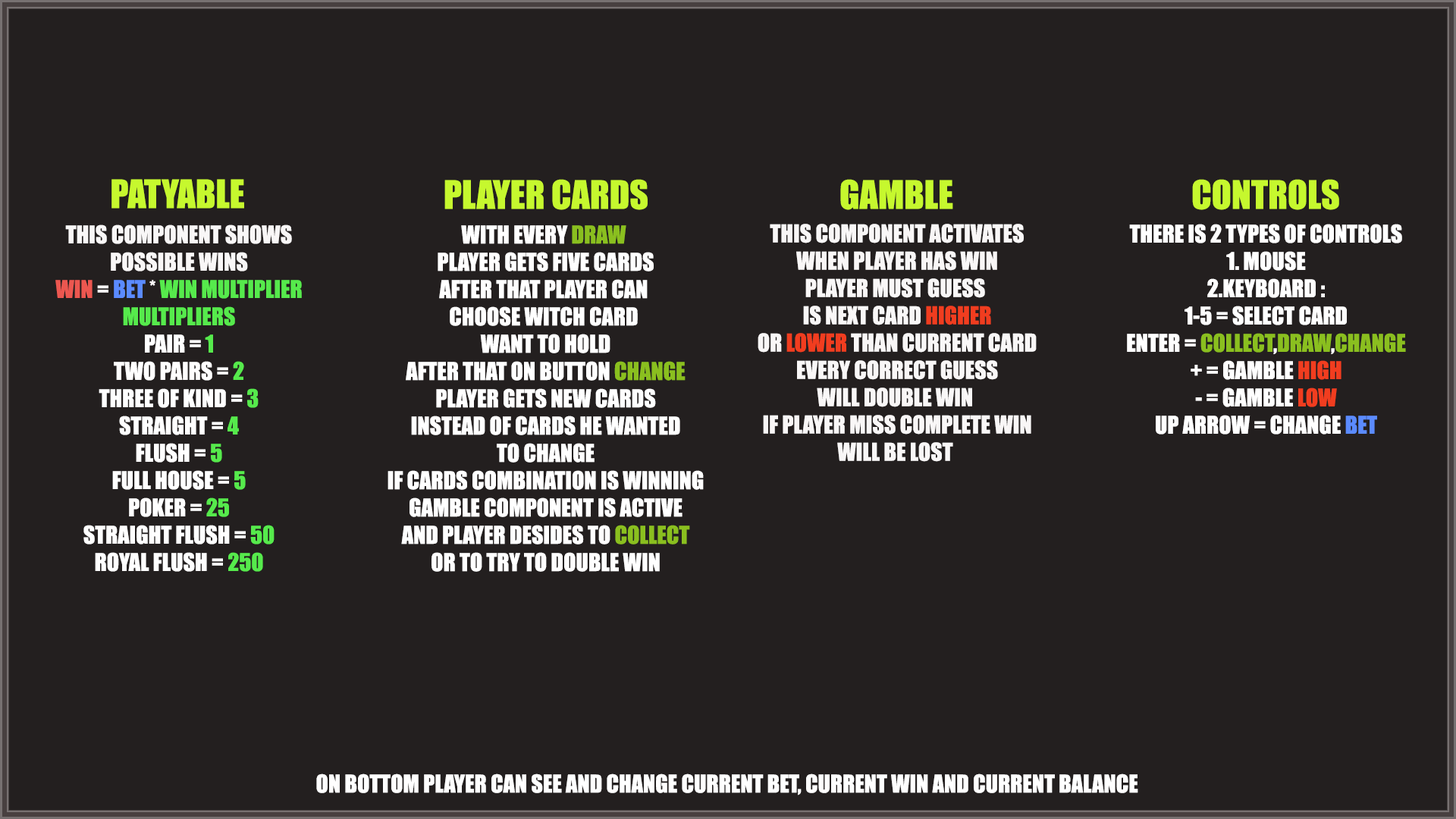
<style>
.page{position:relative;width:1456px;height:819px;background:#231f1f}
.page>*{position:absolute;margin:0}
.t1{font:36.4px "Impact";color:#c6f82e}
.t2{font:22.7px "Impact";color:#f9f7f7}
.t3{font:22.7px "Impact";color:#ec5750}
.t4{font:22.7px "Impact";color:#5b8bff}
.t5{font:22.7px "Impact";color:#56ea4c}
.t6{font:22.7px "Impact";color:#ffffff}
.t7{font:22.7px "Impact";color:#8abf1f}
.t8{font:22.7px "Impact";color:#f13d1f}
</style>
<div class="page">
<p class="t1" style="left:111px;top:179px;width:133px;height:30px">PATYABLE</p>
<p class="t1" style="left:444px;top:179px;width:204px;height:31px">PLAYER CARDS</p>
<p class="t1" style="left:840px;top:179px;width:113px;height:31px">GAMBLE</p>
<p class="t1" style="left:1192px;top:179px;width:147px;height:31px">CONTROLS</p>
<p class="t2" style="left:55px;top:224px;width:247px;height:348px;text-align:center">THIS COMPONENT SHOWS<br>POSSIBLE WINS<br><span class="t3">WIN</span> = <span class="t4">BET</span> * <span class="t5">WIN MULTIPLIER<br>MULTIPLIERS<br></span><span class="t6">PAIR =</span><span class="t5"> 1<br></span><span class="t6">TWO PAIRS =</span><span class="t5"> 2<br></span><span class="t6">THREE OF KIND =</span><span class="t5"> 3<br></span><span class="t6">STRAIGHT =</span><span class="t5"> 4<br></span><span class="t6">FLUSH =</span><span class="t5"> 5<br></span><span class="t6">FULL HOUSE = </span><span class="t5">5<br></span><span class="t6">POKER =</span><span class="t5"> 25<br></span><span class="t6">STRAIGHT FLUSH =</span><span class="t5"> 50<br></span><span class="t6">ROYAL FLUSH =</span><span class="t5"> 250</span></p>
<p class="t6" style="left:388px;top:225px;width:316px;height:347px;text-align:center">WITH EVERY <span class="t7">DRAW</span> <br>PLAYER GETS FIVE CARDS<br>AFTER THAT PLAYER CAN <br>CHOOSE WITCH CARD <br>WANT TO HOLD<br>AFTER THAT ON BUTTON <span class="t7">CHANGE<br></span>PLAYER GETS NEW CARDS<br>INSTEAD OF CARDS HE WANTED<br>TO CHANGE<br>IF CARDS COMBINATION IS WINNING<br>GAMBLE COMPONENT IS ACTIVE<br>AND PLAYER DESIDES TO <span class="t7">COLLECT<br></span>OR TO TRY TO DOUBLE WIN</p>
<p class="t2" style="left:758px;top:224px;width:279px;height:238px;text-align:center">THIS COMPONENT ACTIVATES<br>WHEN PLAYER HAS WIN<br>PLAYER MUST GUESS <br>IS NEXT CARD <span class="t8">HIGHER<br></span>OR <span class="t8">LOWER</span> THAN CURRENT CARD<br>EVERY CORRECT GUESS<br>WILL DOUBLE WIN <br>IF PLAYER MISS COMPLETE WIN<br>WILL BE LOST</p>
<p class="t6" style="left:1127px;top:224px;width:279px;height:211px;text-align:center">THERE IS 2 TYPES OF CONTROLS<br>1. MOUSE<br>2.KEYBOARD :<br>1-5 = SELECT CARD<br>ENTER = <span class="t7">COLLECT</span>,<span class="t7">DRAW</span>,<span class="t7">CHANGE<br></span>+ = GAMBLE <span class="t8">HIGH<br></span>- = GAMBLE <span class="t8">LOW<br></span>UP ARROW = CHANGE <span class="t4">BET</span></p>
<p class="t6" style="left:316px;top:773px;width:822px;height:22px">ON BOTTOM PLAYER CAN SEE AND CHANGE CURRENT BET, CURRENT WIN AND CURRENT BALANCE</p>
</div>
